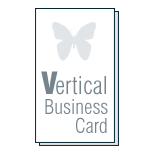
<style>
.page{position:relative;width:150px;height:150px;background:#ffffff}
.page>*{position:absolute;margin:0}
.t1{font:30px "Swiss721BT-BlackCondensed";color:#76858d}
.t2{font:24px "Swiss721BT-LightCondensed";color:#76858d}
.t3{font:20px "Swiss721BT-LightCondensed";color:#76858d}
</style>
<div class="page">
<p class="t1" style="left:41px;top:71px;width:17px;height:23px">V</p>
<p class="t2" style="left:56px;top:76px;width:50px;height:19px">ertical</p>
<p class="t3" style="left:45px;top:99px;width:63px;height:15px">Business</p>
<p class="t3" style="left:76px;top:117px;width:31px;height:16px">Card</p>
</div>
